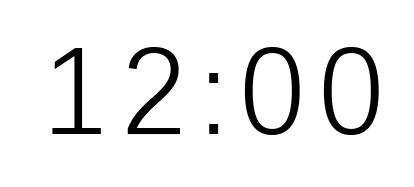
<style>
.page{position:relative;width:414px;height:187px;background:#ffffff}
.page>*{position:absolute;margin:0}
.t1{font:125px "DengXian";letter-spacing:0.1em;color:#000000}
</style>
<div class="page">
<p class="t1" style="left:52px;top:47px;width:327px;height:88px">12:00</p>
</div>
